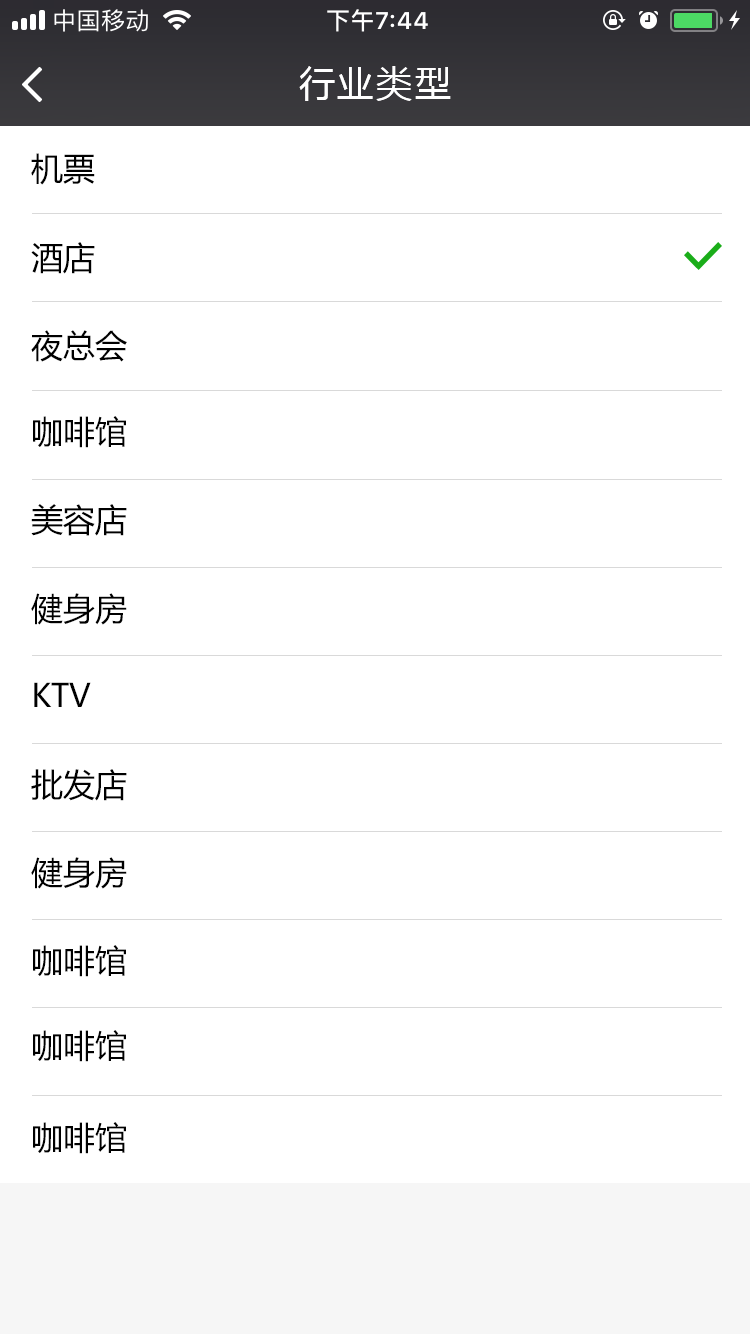
<style>
.page{position:relative;width:750px;height:1334px;background:#ffffff}
.page>*{position:absolute;margin:0}
.t1{font:36px "MicrosoftYaHei";letter-spacing:0.08em;color:#ffffff}
.t2{font:32px "MicrosoftYaHei";color:#000000}
</style>
<div class="page">
<p class="t1" style="left:299px;top:66px;width:152px;height:35px">行业类型</p>
<p class="t2" style="left:31px;top:153px;width:64px;height:32px">机票</p>
<p class="t2" style="left:31px;top:242px;width:64px;height:32px">酒店</p>
<p class="t2" style="left:31px;top:330px;width:96px;height:32px">夜总会</p>
<p class="t2" style="left:33px;top:416px;width:93px;height:32px">咖啡馆</p>
<p class="t2" style="left:31px;top:504px;width:96px;height:32px">美容店</p>
<p class="t2" style="left:31px;top:593px;width:96px;height:32px">健身房</p>
<p class="t2" style="left:34px;top:682px;width:57px;height:25px">KTV</p>
<p class="t2" style="left:31px;top:769px;width:96px;height:32px">批发店</p>
<p class="t2" style="left:31px;top:857px;width:96px;height:32px">健身房</p>
<p class="t2" style="left:33px;top:945px;width:93px;height:32px">咖啡馆</p>
<p class="t2" style="left:33px;top:1030px;width:93px;height:32px">咖啡馆</p>
<p class="t2" style="left:33px;top:1122px;width:93px;height:32px">咖啡馆</p>
</div>
